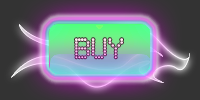
<style>
.page{position:relative;width:200px;height:100px}
.page>*{position:absolute;margin:0}
.t1{font:23.3px "AtomicClockRadio"}
</style>
<div class="page">
<p class="t1" style="left:75px;top:38px;width:48px;height:21px">BUY</p>
<p class="t1" style="left:75px;top:38px;width:48px;height:21px">BUY</p>
</div>
